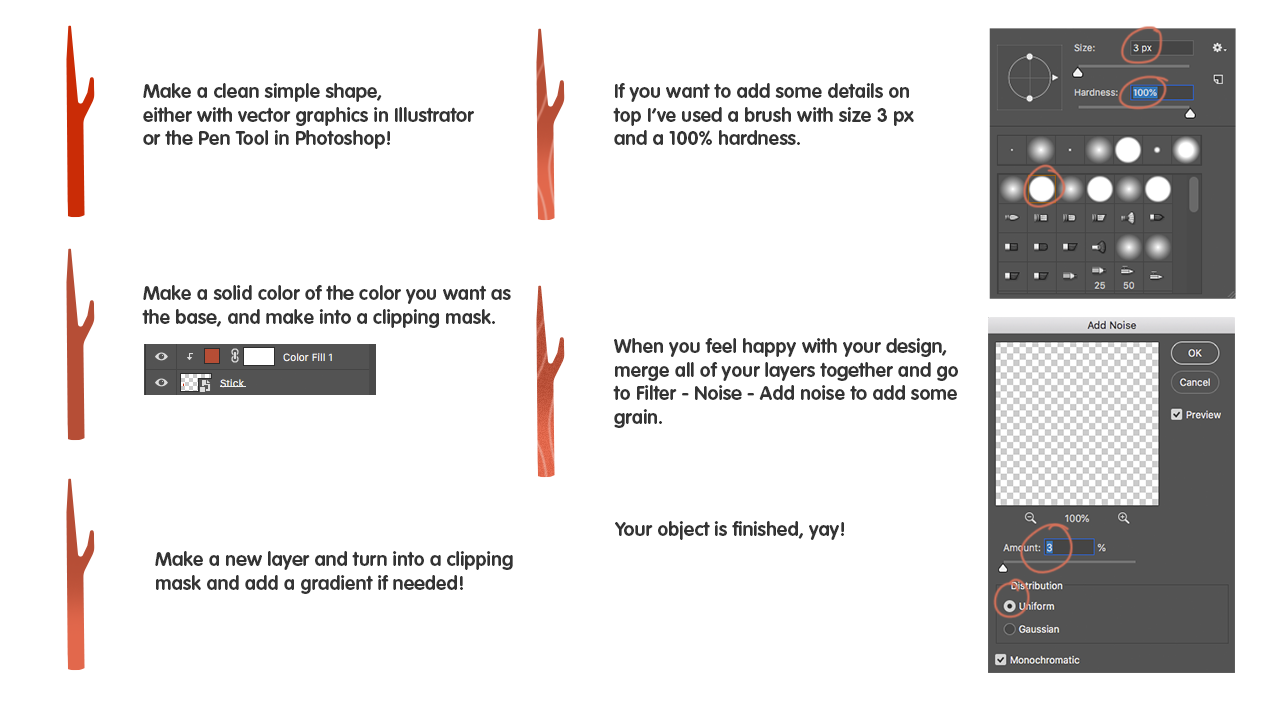
<style>
.page{position:relative;width:1280px;height:720px;background:#ffffff}
.page>*{position:absolute;margin:0}
.t1{font:19.6px "VAGRounded-Bold";color:#343434}
</style>
<div class="page">
<p class="t1" style="left:143px;top:83px;width:331px;height:66px">Make a clean simple shape,<br>either with vector graphics in Illustrator<br>or the Pen Tool in Photoshop!</p>
<p class="t1" style="left:613px;top:83px;width:301px;height:63px">If you want to add some details on <br>top I’ve used a brush with size 3 px<br>and a 100% hardness.</p>
<p class="t1" style="left:142px;top:285px;width:369px;height:43px">Make a solid color of the color you want as <br>the base, and make into a clipping mask.</p>
<p class="t1" style="left:613px;top:338px;width:345px;height:90px">When you feel happy with your design,<br>merge all of your layers together and go<br>to Filter - Noise - Add noise to add some <br>grain.</p>
<p class="t1" style="left:615px;top:521px;width:229px;height:19px">Your object is finished, yay!</p>
<p class="t1" style="left:155px;top:551px;width:358px;height:43px">Make a new layer and turn into a clipping <br>mask and add a gradient if needed!</p>
</div>
